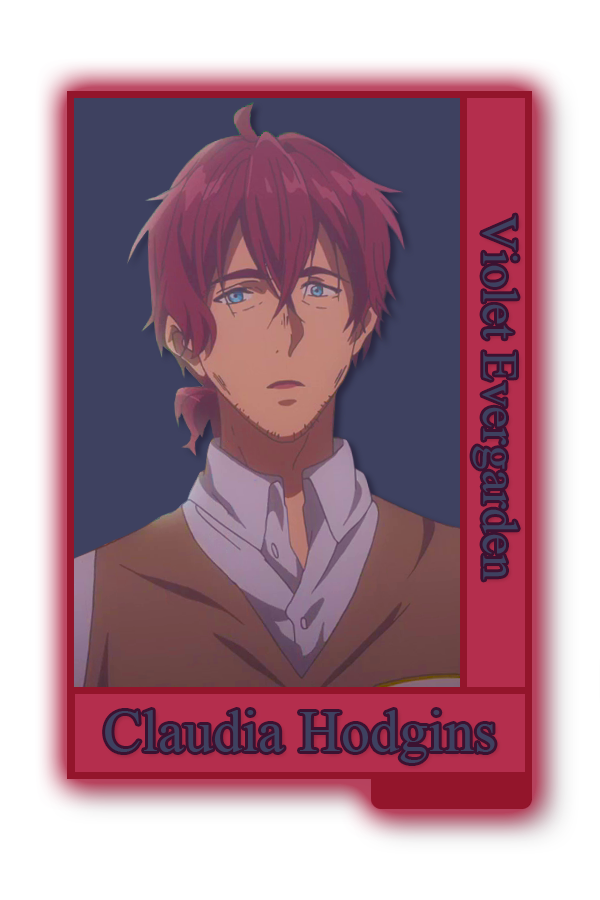
<style>
.page{position:relative;width:600px;height:900px;background:#ffffff}
.page>*{position:absolute;margin:0}
.t1{font:49.6px "TimesNewRomanPSMT";color:#454c4e}
.t2{font:58.3px "TimesNewRomanPSMT";color:#454c4e}
</style>
<div class="page">
<p class="t1" style="left:472px;top:215px;width:46px;height:365px;rotate:90deg">Violet Evergarden</p>
<p class="t2" style="left:105px;top:710px;width:390px;height:53px">Claudia Hodgins</p>
</div>
